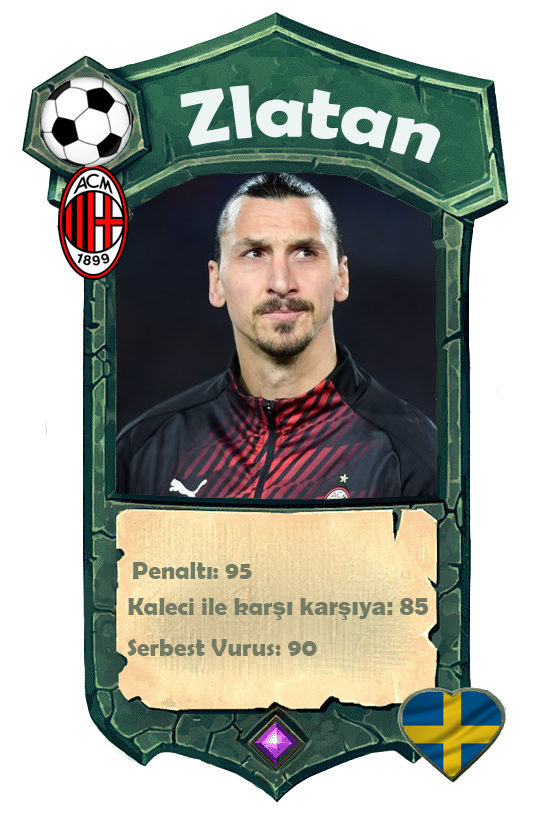
<style>
.page{position:relative;width:558px;height:814px;background:#ffffff}
.page>*{position:absolute;margin:0}
.t1{font:75.7px "BerlinSansFBDemi-Bold";color:#ecf4f4;scale:1.06 1}
.t2{font:25px "BerlinSansFBDemi-Bold";color:#747b65}
.t3{font:25px "FranklinGothic-Heavy";color:#747b65}
</style>
<div class="page">
<p class="t1" style="left:180px;top:85px;width:261px;height:78px;rotate:4deg">Zlatan</p>
<p class="t2" style="left:133px;top:562px;width:119px;height:17px">Penaltı: 95</p>
<p class="t2" style="left:128px;top:598px;width:300px;height:22px">Kaleci ile kar<span class="t3">şı karşıya: 85</span></p>
<p class="t2" style="left:127px;top:639px;width:190px;height:17px">Serbest Vurus: 90</p>
</div>
